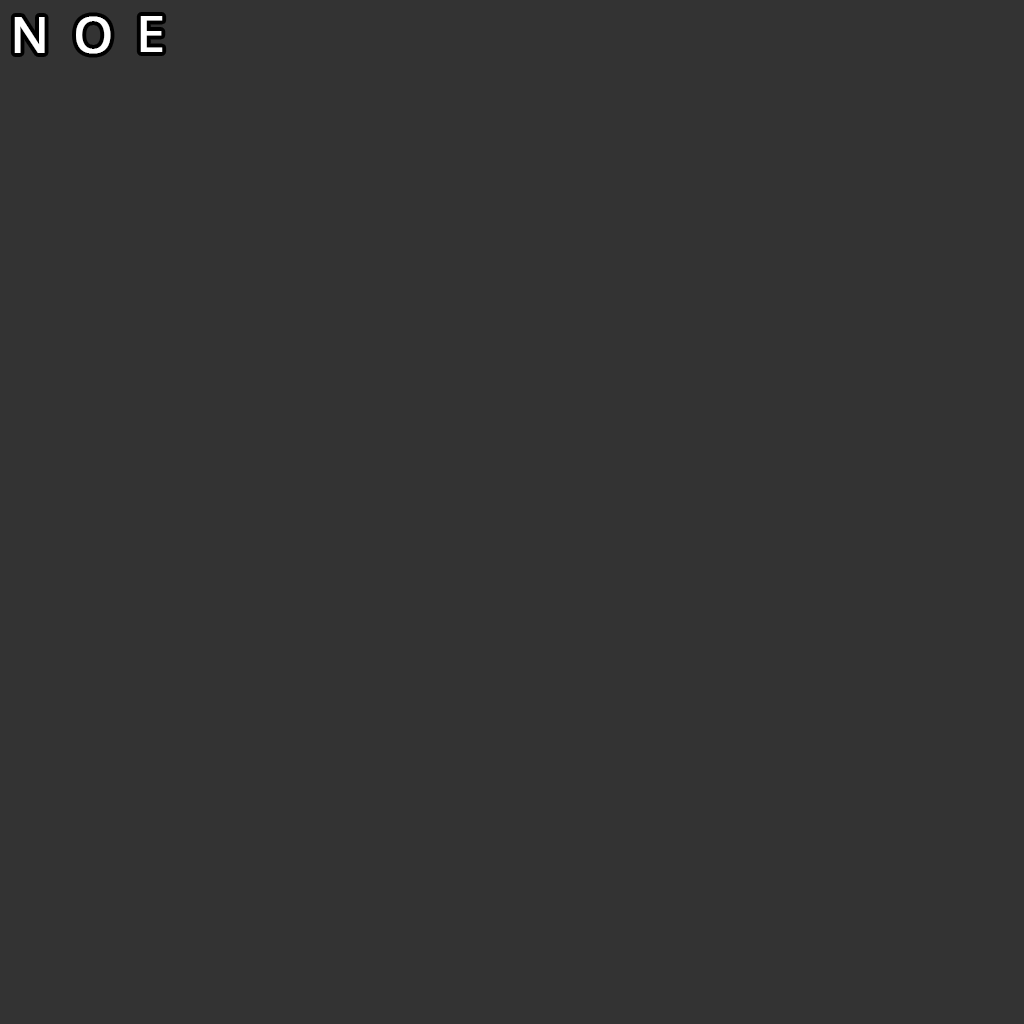
<style>
.page{position:relative;width:1024px;height:1024px;background:#333333}
.page>*{position:absolute;margin:0}
.t1{font:50px "NotoSans-Regular";color:#ffffff;font-weight:bold}
</style>
<div class="page">
<p class="t1" style="left:14px;top:17px;width:31px;height:36px">N</p>
<p class="t1" style="left:76px;top:16px;width:35px;height:38px">O</p>
<p class="t1" style="left:140px;top:16px;width:23px;height:36px">E</p>
</div>
